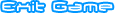
<style>
.page{position:relative;width:115px;height:13px;background:#ffffff}
.page>*{position:absolute;margin:0}
.t1{font:16px "ThundergodII";color:#ffffff}
</style>
<div class="page">
<p class="t1" style="left:2px;top:2px;width:111px;height:9px">Exit Game</p>
</div>
